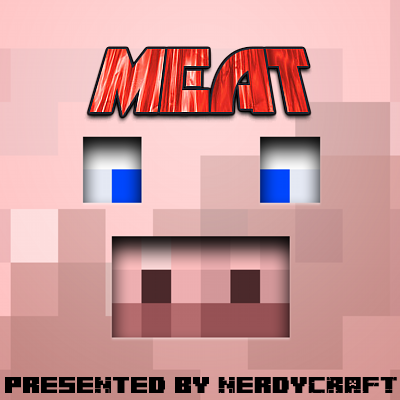
<style>
.page{position:relative;width:400px;height:400px}
.page>*{position:absolute;margin:0}
.t1{font:18px "Minecraft-z2font";color:#000000}
</style>
<div class="page">
<p class="t1" style="left:5px;top:377px;width:392px;height:16px">presented by nerdyCRAFT</p>
</div>
